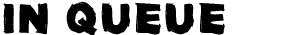
<style>
.page{position:relative;width:300px;height:35px;background:#ffffff}
.page>*{position:absolute;margin:0}
.t1{font:40px "Oil-Makes-You-Run-Faster";letter-spacing:0.02em;color:#000000}
</style>
<div class="page">
<p class="t1" style="left:3px;top:1px;width:222px;height:35px">in queue</p>
</div>
